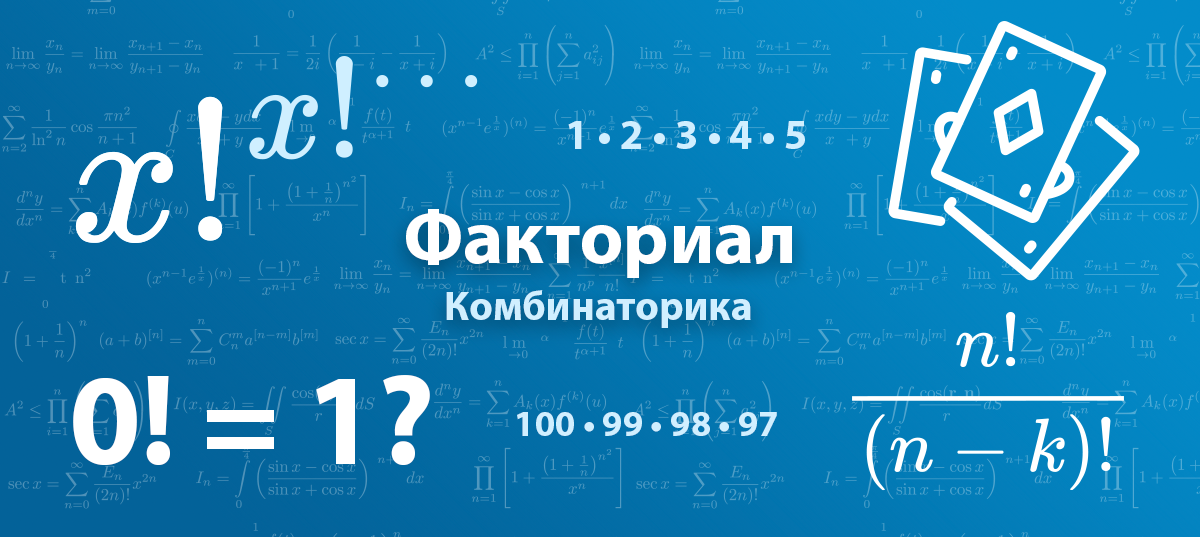
<style>
.page{position:relative;width:1200px;height:537px}
.page>*{position:absolute;margin:0}
.t1{font:41.7px "MyriadPro-Bold";color:#d0efff}
.t2{font:76.6px "MyriadPro-Bold";color:#ffffff}
.t3{font:41.5px "MyriadPro-Bold";color:#d0efff}
.t4{font:130px "MyriadPro-Bold";color:#ffffff}
.t5{font:36.2px "MyriadPro-Bold";color:#d0efff}
</style>
<div class="page">
<p class="t1" style="left:568px;top:121px;width:237px;height:28px">1 • 2 • 3 • 4 • 5</p>
<p class="t2" style="left:406px;top:209px;width:386px;height:69px">Факториал</p>
<p class="t3" style="left:446px;top:290px;width:305px;height:38px">Комбинаторика</p>
<p class="t4" style="left:73px;top:375px;width:357px;height:91px">0! = 1?</p>
<p class="t5" style="left:517px;top:412px;width:260px;height:24px">100 • 99 • 98 • 97</p>
</div>
